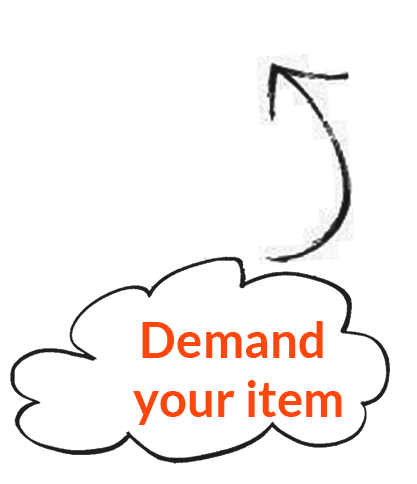
<style>
.page{position:relative;width:417px;height:484px;background:#ffffff}
.page>*{position:absolute;margin:0}
.t1{font:49.3px "Lato-Bold";color:#ff460d}
</style>
<div class="page">
<p class="t1" style="left:133px;top:321px;width:209px;height:104px;text-align:right">Demand  <br>your item</p>
</div>
